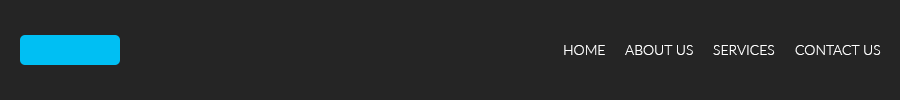
<style>
.page{position:relative;width:900px;height:100px;background:#252525}
.page>*{position:absolute;margin:0}
.t1{font:14px "Lato-Light";color:#ffffff;text-transform:uppercase}
</style>
<div class="page">
<p class="t1" style="left:564px;top:45px;width:41px;height:10px">Home</p>
<p class="t1" style="left:625px;top:45px;width:68px;height:10px">About Us</p>
<p class="t1" style="left:713px;top:45px;width:62px;height:10px">Services</p>
<p class="t1" style="left:795px;top:45px;width:86px;height:10px">Contact Us</p>
</div>
